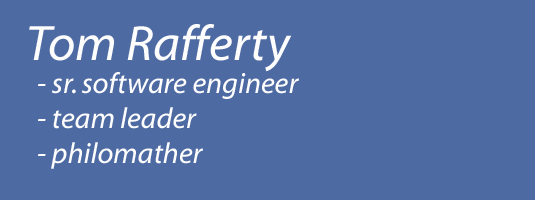
<style>
.page{position:relative;width:535px;height:200px;background:#4d6aa2}
.page>*{position:absolute;margin:0}
.t1{font:50px "Myriad-ItWeb";color:#fdfdfe}
.t2{font:29.2px "Myriad-ItWeb";color:#fdfdfe}
</style>
<div class="page">
<p class="t1" style="left:29px;top:24px;width:263px;height:48px">Tom Rafferty</p>
<p class="t2" style="left:38px;top:72px;width:261px;height:97px">- sr. software engineer<br>- team leader<br>- philomather</p>
</div>
